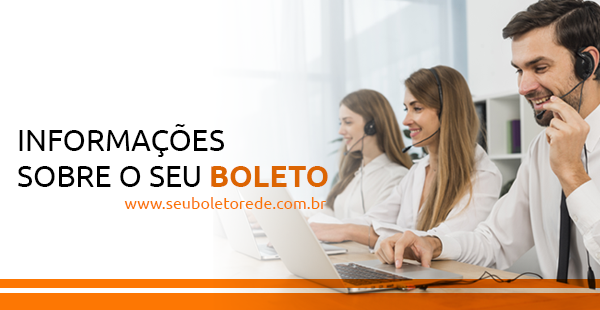
<style>
.page{position:relative;width:600px;height:310px;background:#ffffff}
.page>*{position:absolute;margin:0}
.t1{font:30px "Ubuntu";color:#000000}
.t2{font:30px "Ubuntu-Bold";color:#dc6502}
.t3{font:16px "Ubuntu";color:#fa7503}
</style>
<div class="page">
<p class="t1" style="left:18px;top:124px;width:310px;height:63px">INFORMAÇÕES<br>SOBRE O SEU <span class="t2">BOLETO</span></p>
<p class="t3" style="left:124px;top:197px;width:202px;height:12px">www.seuboletorede.com.br</p>
</div>
